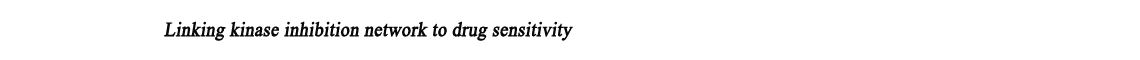
<style>
.page{position:relative;width:1140px;height:60px;background:#ffffff}
.page>*{position:absolute;margin:0}
.t1{font:20px "TimesNewRomanPSMT";color:#080808;font-weight:bold;font-style:italic;scale:0.9 1}
</style>
<div class="page">
<p class="t1" style="left:164px;top:21px;width:409px;height:20px">Linking kinase inhibition network to drug sensitivity</p>
</div>
